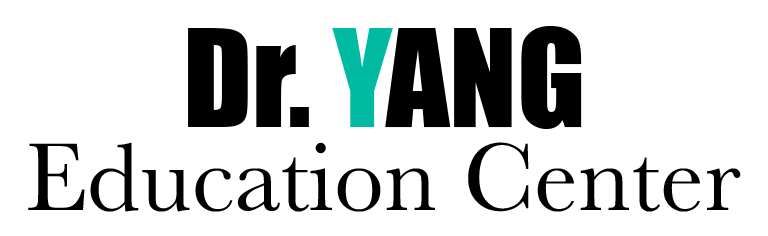
<style>
.page{position:relative;width:768px;height:236px;background:#ffffff}
.page>*{position:absolute;margin:0}
.t1{font:125px "Impact";color:#000000}
.t2{font:125px "Impact";color:#00baa2}
.t3{font:100px "Baskerville";color:#000000}
</style>
<div class="page">
<p class="t1" style="left:188px;top:26px;width:394px;height:103px">Dr. <span class="t2">Y</span>ANG</p>
<p class="t3" style="left:28px;top:142px;width:713px;height:70px">Education Center</p>
</div>
